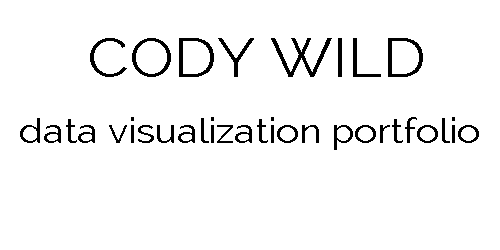
<style>
.page{position:relative;width:500px;height:250px;background:#ffffff}
.page>*{position:absolute;margin:0}
.t1{font:34.6px "Raleway";color:#000000;scale:1.1 1}
.t2{font:54.5px "Raleway";color:#000000;scale:1.1 1}
</style>
<div class="page">
<p class="t1" style="left:20px;top:38px;width:459px;height:112px;text-align:center"><span class="t2">CODY WILD<br></span>data visualization portfolio</p>
</div>
